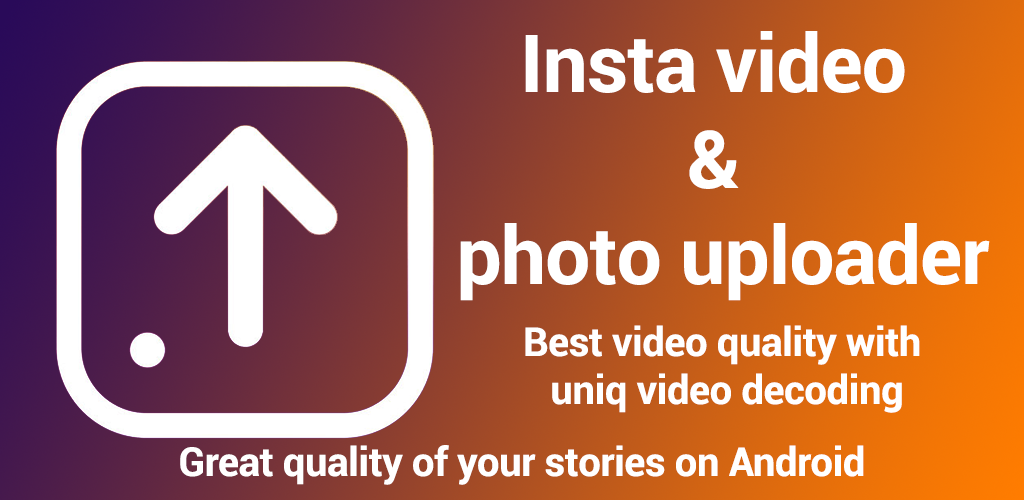
<style>
.page{position:relative;width:1024px;height:500px}
.page>*{position:absolute;margin:0}
.t1{font:80px "Roboto-Bold";letter-spacing:-0.01em;color:#ffffff}
.t2{font:40px "Roboto-Bold";letter-spacing:-0.01em;color:#ffffff}
</style>
<div class="page">
<p class="t1" style="left:460px;top:31px;width:530px;height:270px;text-align:center">Insta video <br>&amp; <br>photo uploader</p>
<p class="t2" style="left:525px;top:325px;width:395px;height:88px;text-align:center">Best video quality with <br>uniq video decoding</p>
<p class="t2" style="left:180px;top:445px;width:684px;height:40px">Great quality of your stories on Android</p>
</div>
